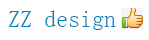
<style>
.page{position:relative;width:149px;height:40px;background:#ffffff}
.page>*{position:absolute;margin:0}
.t1{font:24px "YouYuan";color:#0082bd}
</style>
<div class="page">
<p class="t1" style="left:8px;top:10px;width:108px;height:20px">ZZ design</p>
</div>
